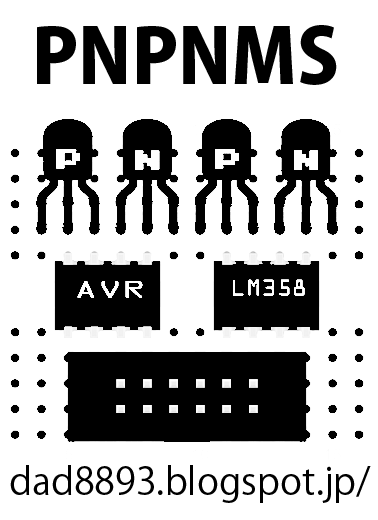
<style>
.page{position:relative;width:378px;height:520px;background:#ffffff}
.page>*{position:absolute;margin:0}
.t1{font:75px "KozGoPr6N-Heavy";color:#000000}
.t2{font:37.5px "KozGoPr6N-Regular";color:#000000}
</style>
<div class="page">
<p class="t1" style="left:37px;top:25px;width:300px;height:60px">PNPNMS</p>
<p class="t2" style="left:10px;top:465px;width:361px;height:38px">dad8893.blogspot.jp/</p>
</div>
